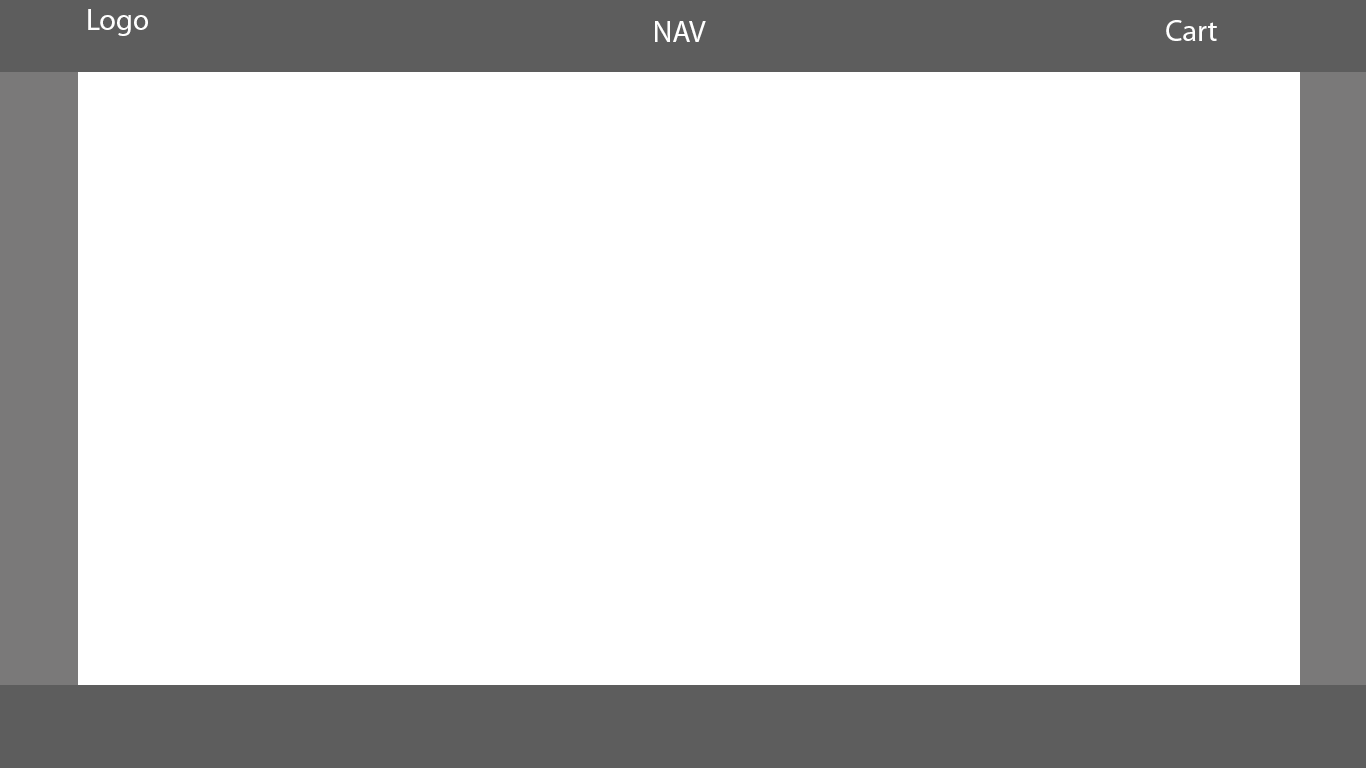
<style>
.page{position:relative;width:1366px;height:768px;background:#ffffff}
.page>*{position:absolute;margin:0}
.t1{font:30px "MyriadPro-Regular";color:#ffffff}
</style>
<div class="page">
<p class="t1" style="left:88px;top:9px;width:60px;height:27px">Logo<br><br>Logo</p>
<p class="t1" style="left:655px;top:21px;width:51px;height:21px">NAV</p>
<p class="t1" style="left:1166px;top:20px;width:51px;height:21px">Cart</p>
</div>
